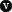
<style>
.page{position:relative;width:12px;height:12px;background:#030404}
.page>*{position:absolute;margin:0}
.t1{font:12px "ArabicTypesetting";color:#ffffff}
</style>
<div class="page">
<p class="t1" style="left:3px;top:3px;width:7px;height:6px">V</p>
</div>
